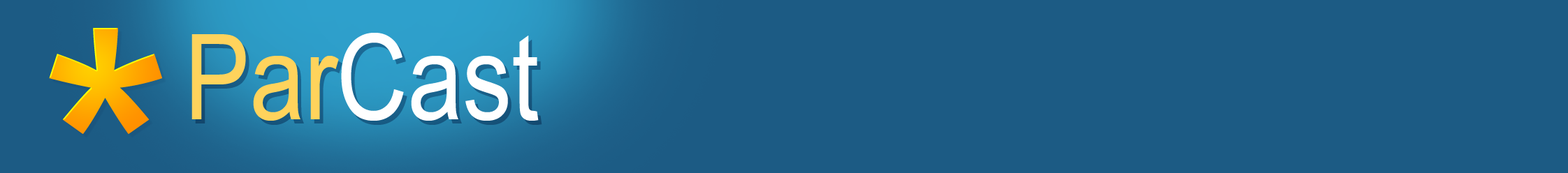
<style>
.page{position:relative;width:1568px;height:173px;background:#1c5b84}
.page>*{position:absolute;margin:0}
.t1{font:349.4px "ArialMT"}
.t2{font:119.5px "ArialNarrow";color:#ffffff}
.t3{font:119.5px "ArialNarrow";color:#ffd35c}
</style>
<div class="page">
<p class="t1" style="left:49px;top:28px;width:113px;height:106px">*</p>
<p class="t2" style="left:191px;top:33px;width:348px;height:88px"><span class="t3">Par</span>Cast</p>
</div>
